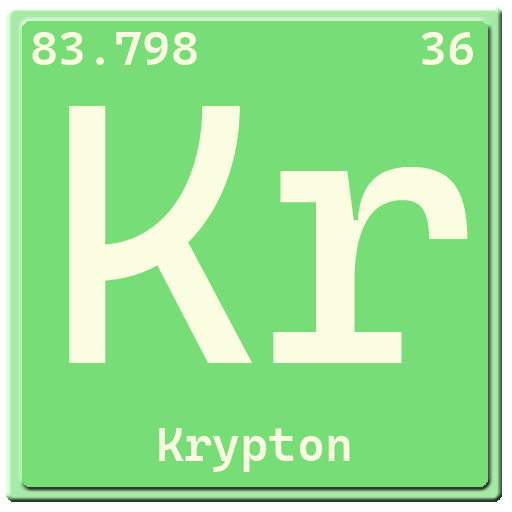
<style>
.page{position:relative;width:512px;height:512px;background:#77dd76}
.page>*{position:absolute;margin:0}
.t1{font:48px "CascadiaCode-SemiBold";color:#fbfde1}
.t2{font:370px "CascadiaCode-Roman";color:#fbfde1}
</style>
<div class="page">
<p class="t1" style="left:32px;top:32px;width:165px;height:33px">83.798</p>
<p class="t1" style="left:421px;top:32px;width:52px;height:33px">36</p>
<p class="t2" style="left:69px;top:106px;width:399px;height:257px">Kr</p>
<p class="t1" style="left:159px;top:428px;width:191px;height:44px">Krypton</p>
</div>
